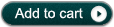
<style>
.page{position:relative;width:114px;height:27px}
.page>*{position:absolute;margin:0}
.t1{font:14px "ArialUnicodeMS";color:#fafafa}
</style>
<div class="page">
<p class="t1" style="left:14px;top:8px;width:69px;height:11px">Add to cart</p>
</div>
